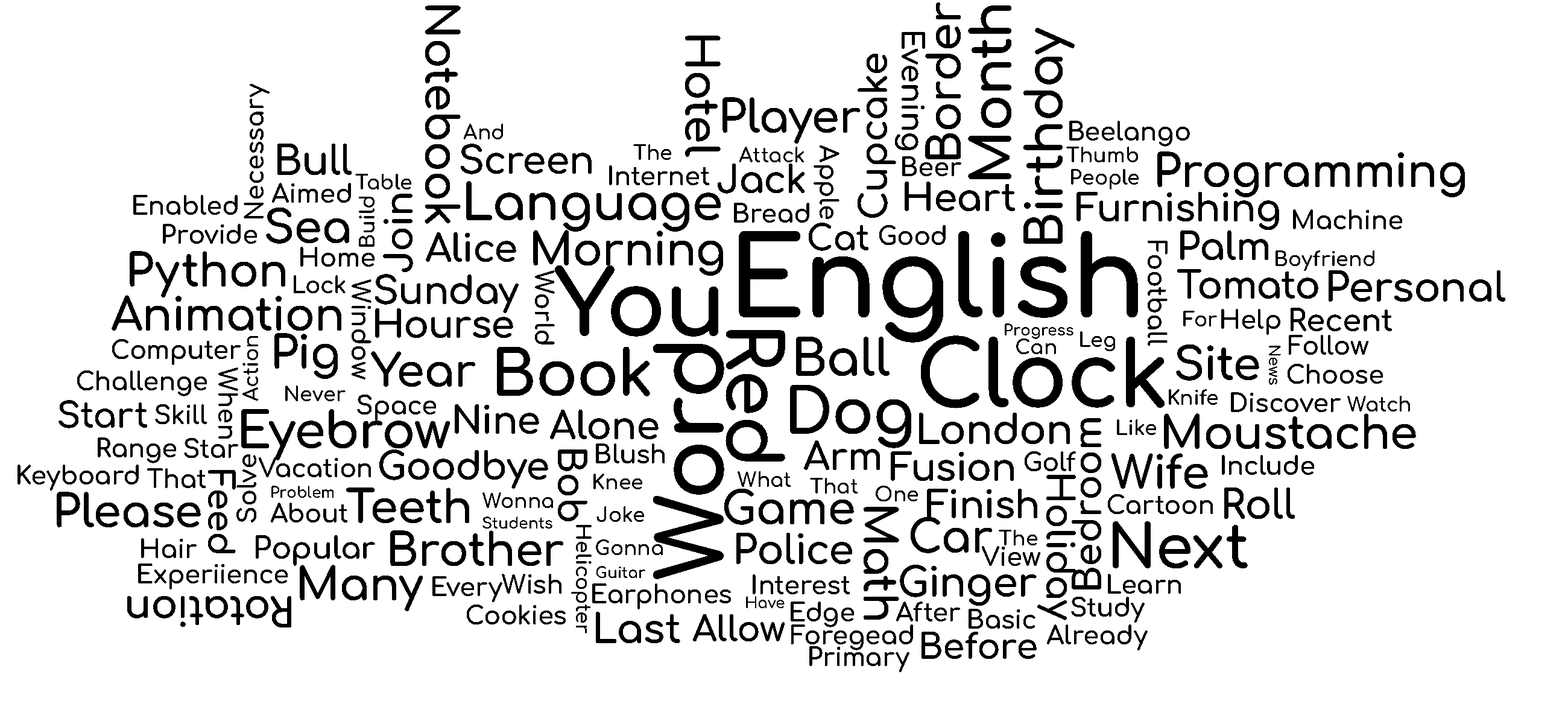
<style>
.page{position:relative;width:1568px;height:724px;background:#ffffff}
.page>*{position:absolute;margin:0}
.t1{font:45.2px "Comfortaa-Bold";color:#000000}
.t2{font:55.3px "Comfortaa-Bold";color:#000000}
.t3{font:50.3px "Comfortaa-Bold";color:#000000}
.t4{font:30.2px "Comfortaa-Bold";color:#000000}
.t5{font:37.7px "Comfortaa-Bold";color:#000000}
.t6{font:25.1px "Comfortaa-Bold";color:#000000}
.t7{font:20.1px "Comfortaa-Bold";color:#000000}
.t8{font:40.2px "Comfortaa-Bold";color:#000000}
.t9{font:110.6px "Comfortaa-Bold";color:#000000}
.t10{font:35.2px "Comfortaa-Bold";color:#000000}
.t11{font:90.5px "Comfortaa-Bold";color:#000000}
.t12{font:22.6px "Comfortaa-Bold";color:#000000}
.t13{font:75.4px "Comfortaa-Bold";color:#000000}
.t14{font:15.1px "Comfortaa-Bold";color:#000000}
.t15{font:62.8px "Comfortaa-Bold";color:#000000}
.t16{font:60.3px "Comfortaa-Bold";color:#000000}
</style>
<div class="page">
<p class="t1" style="left:425px;top:5px;width:36px;height:219px;rotate:90deg">Notebook</p>
<p class="t1" style="left:925px;top:2px;width:36px;height:157px;rotate:-90deg">Border</p>
<p class="t2" style="left:968px;top:5px;width:43px;height:174px;rotate:-90deg">Month</p>
<p class="t3" style="left:1023px;top:28px;width:52px;height:216px;rotate:-90deg">Birthday</p>
<p class="t1" style="left:685px;top:36px;width:36px;height:121px;rotate:90deg">Hotel</p>
<p class="t4" style="left:895px;top:32px;width:30px;height:118px;rotate:90deg">Evening</p>
<p class="t5" style="left:858px;top:54px;width:38px;height:164px;rotate:-90deg">Cupcake</p>
<p class="t6" style="left:244px;top:84px;width:26px;height:134px;rotate:-90deg">Necessary</p>
<p class="t1" style="left:722px;top:97px;width:138px;height:47px">Player</p>
<p class="t7" style="left:464px;top:124px;width:39px;height:15px">And</p>
<p class="t6" style="left:1069px;top:121px;width:121px;height:26px">Beelango</p>
<p class="t8" style="left:277px;top:144px;width:75px;height:31px">Bull</p>
<p class="t5" style="left:461px;top:144px;width:131px;height:30px">Screen</p>
<p class="t7" style="left:633px;top:144px;width:38px;height:16px">The</p>
<p class="t7" style="left:739px;top:147px;width:65px;height:15px">Attack</p>
<p class="t6" style="left:814px;top:145px;width:25px;height:74px;rotate:90deg">Apple</p>
<p class="t7" style="left:1066px;top:147px;width:72px;height:15px">Thumb</p>
<p class="t6" style="left:902px;top:156px;width:59px;height:20px">Beer</p>
<p class="t1" style="left:1157px;top:151px;width:308px;height:46px">Programming</p>
<p class="t7" style="left:355px;top:174px;width:56px;height:15px">Table</p>
<p class="t6" style="left:609px;top:165px;width:100px;height:20px">Internet</p>
<p class="t5" style="left:718px;top:163px;width:87px;height:31px">Jack</p>
<p class="t7" style="left:1071px;top:169px;width:68px;height:20px">People</p>
<p class="t6" style="left:272px;top:183px;width:79px;height:20px">Aimed</p>
<p class="t3" style="left:466px;top:181px;width:255px;height:51px">Language</p>
<p class="t5" style="left:905px;top:182px;width:110px;height:29px">Heart</p>
<p class="t6" style="left:133px;top:195px;width:105px;height:20px">Enabled</p>
<p class="t7" style="left:359px;top:197px;width:16px;height:50px;rotate:-90deg">Build</p>
<p class="t5" style="left:383px;top:194px;width:30px;height:78px;rotate:-90deg">Join</p>
<p class="t5" style="left:1076px;top:192px;width:203px;height:38px">Furnishing</p>
<p class="t1" style="left:266px;top:207px;width:83px;height:37px">Sea</p>
<p class="t6" style="left:734px;top:203px;width:75px;height:20px">Bread</p>
<p class="t6" style="left:1293px;top:209px;width:109px;height:20px">Machine</p>
<p class="t6" style="left:163px;top:224px;width:94px;height:20px">Provide</p>
<p class="t5" style="left:426px;top:232px;width:90px;height:30px">Alice</p>
<p class="t1" style="left:533px;top:230px;width:190px;height:46px">Morning</p>
<p class="t9" style="left:739px;top:231px;width:399px;height:112px">English</p>
<p class="t10" style="left:809px;top:223px;width:59px;height:28px">Cat</p>
<p class="t6" style="left:879px;top:225px;width:67px;height:20px">Good</p>
<p class="t5" style="left:1180px;top:230px;width:88px;height:30px">Palm</p>
<p class="t6" style="left:1148px;top:241px;width:20px;height:105px;rotate:90deg">Football</p>
<p class="t1" style="left:130px;top:251px;width:155px;height:46px">Python</p>
<p class="t6" style="left:300px;top:247px;width:75px;height:20px">Home</p>
<p class="t7" style="left:1276px;top:250px;width:98px;height:21px">Boyfriend</p>
<p class="t11" style="left:555px;top:265px;width:163px;height:72px">You</p>
<p class="t5" style="left:1177px;top:269px;width:141px;height:30px">Tomato</p>
<p class="t12" style="left:294px;top:275px;width:52px;height:18px">Lock</p>
<p class="t6" style="left:352px;top:279px;width:19px;height:100px;rotate:90deg">Window</p>
<p class="t5" style="left:375px;top:274px;width:144px;height:39px">Sunday</p>
<p class="t6" style="left:535px;top:270px;width:20px;height:74px;rotate:90deg">World</p>
<p class="t8" style="left:1329px;top:270px;width:176px;height:32px">Personal</p>
<p class="t1" style="left:112px;top:295px;width:229px;height:35px">Animation</p>
<p class="t5" style="left:375px;top:308px;width:138px;height:30px">Hourse</p>
<p class="t7" style="left:1183px;top:311px;width:34px;height:15px">For</p>
<p class="t6" style="left:1221px;top:309px;width:59px;height:26px">Help</p>
<p class="t4" style="left:1291px;top:308px;width:101px;height:23px">Recent</p>
<p class="t13" style="left:726px;top:330px;width:59px;height:131px;rotate:90deg">Red</p>
<p class="t14" style="left:1005px;top:323px;width:68px;height:16px">Progress</p>
<p class="t6" style="left:112px;top:339px;width:129px;height:26px">Computer</p>
<p class="t7" style="left:242px;top:336px;width:16px;height:64px;rotate:-90deg">Action</p>
<p class="t1" style="left:274px;top:333px;width:64px;height:46px">Pig</p>
<p class="t3" style="left:796px;top:337px;width:94px;height:39px">Ball</p>
<p class="t11" style="left:921px;top:335px;width:244px;height:73px">Clock</p>
<p class="t7" style="left:1016px;top:338px;width:40px;height:16px">Can</p>
<p class="t7" style="left:1080px;top:331px;width:35px;height:20px">Leg</p>
<p class="t6" style="left:1289px;top:335px;width:79px;height:20px">Follow</p>
<p class="t1" style="left:371px;top:351px;width:104px;height:36px">Year</p>
<p class="t15" style="left:497px;top:347px;width:153px;height:49px">Book</p>
<p class="t11" style="left:653px;top:344px;width:71px;height:235px;rotate:-90deg">Word</p>
<p class="t1" style="left:1176px;top:344px;width:83px;height:37px">Site</p>
<p class="t14" style="left:1269px;top:346px;width:12px;height:39px;rotate:90deg">News</p>
<p class="t6" style="left:1288px;top:364px;width:95px;height:20px">Choose</p>
<p class="t6" style="left:77px;top:370px;width:130px;height:26px">Challenge</p>
<p class="t6" style="left:218px;top:367px;width:20px;height:71px;rotate:90deg">When</p>
<p class="t7" style="left:285px;top:385px;width:61px;height:16px">Never</p>
<p class="t15" style="left:790px;top:385px;width:121px;height:63px">Dog</p>
<p class="t7" style="left:1169px;top:389px;width:49px;height:16px">Knife</p>
<p class="t10" style="left:58px;top:400px;width:89px;height:28px">Start</p>
<p class="t6" style="left:357px;top:394px;width:79px;height:26px">Space</p>
<p class="t6" style="left:1231px;top:392px;width:110px;height:20px">Discover</p>
<p class="t7" style="left:1347px;top:396px;width:63px;height:15px">Watch</p>
<p class="t6" style="left:155px;top:404px;width:52px;height:20px">Skill</p>
<p class="t3" style="left:241px;top:409px;width:209px;height:51px">Eyebrow</p>
<p class="t5" style="left:455px;top:404px;width:84px;height:30px">Nine</p>
<p class="t5" style="left:550px;top:409px;width:109px;height:30px">Alone</p>
<p class="t8" style="left:919px;top:413px;width:151px;height:31px">London</p>
<p class="t1" style="left:1164px;top:413px;width:252px;height:36px">Moustache</p>
<p class="t5" style="left:1072px;top:418px;width:29px;height:171px;rotate:-90deg">Bedroom</p>
<p class="t7" style="left:1117px;top:419px;width:39px;height:16px">Like</p>
<p class="t6" style="left:98px;top:437px;width:78px;height:26px">Range</p>
<p class="t6" style="left:184px;top:438px;width:54px;height:20px">Star</p>
<p class="t5" style="left:379px;top:449px;width:169px;height:39px">Goodbye</p>
<p class="t5" style="left:558px;top:449px;width:29px;height:72px;rotate:90deg">Bob</p>
<p class="t6" style="left:596px;top:443px;width:69px;height:20px">Blush</p>
<p class="t5" style="left:804px;top:440px;width:76px;height:30px">Arm</p>
<p class="t6" style="left:236px;top:454px;width:20px;height:68px;rotate:-90deg">Solve</p>
<p class="t6" style="left:259px;top:457px;width:112px;height:20px">Vacation</p>
<p class="t5" style="left:891px;top:451px;width:123px;height:30px">Fusion</p>
<p class="t6" style="left:1025px;top:451px;width:51px;height:20px">Golf</p>
<p class="t1" style="left:1111px;top:453px;width:97px;height:35px">Wife</p>
<p class="t6" style="left:1222px;top:455px;width:92px;height:20px">Include</p>
<p class="t6" style="left:17px;top:464px;width:122px;height:26px">Keyboard</p>
<p class="t6" style="left:147px;top:468px;width:59px;height:20px">That</p>
<p class="t10" style="left:208px;top:470px;width:28px;height:83px;rotate:90deg">Feed</p>
<p class="t7" style="left:593px;top:473px;width:49px;height:16px">Knee</p>
<p class="t7" style="left:738px;top:471px;width:53px;height:16px">What</p>
<p class="t14" style="left:271px;top:485px;width:63px;height:13px">Problem</p>
<p class="t7" style="left:810px;top:478px;width:48px;height:15px">That</p>
<p class="t7" style="left:876px;top:485px;width:42px;height:16px">One</p>
<p class="t5" style="left:1037px;top:475px;width:39px;height:145px;rotate:90deg">Holiday</p>
<p class="t1" style="left:57px;top:492px;width:144px;height:35px">Please</p>
<p class="t1" style="left:346px;top:487px;width:123px;height:36px">Teeth</p>
<p class="t7" style="left:482px;top:492px;width:71px;height:16px">Wonna</p>
<p class="t1" style="left:724px;top:488px;width:130px;height:37px">Game</p>
<p class="t5" style="left:927px;top:488px;width:110px;height:30px">Finish</p>
<p class="t6" style="left:1108px;top:494px;width:105px;height:20px">Cartoon</p>
<p class="t8" style="left:1224px;top:487px;width:71px;height:32px">Roll</p>
<p class="t6" style="left:271px;top:502px;width:76px;height:20px">About</p>
<p class="t7" style="left:596px;top:506px;width:48px;height:16px">Joke</p>
<p class="t1" style="left:864px;top:507px;width:35px;height:112px;rotate:90deg">Math</p>
<p class="t14" style="left:482px;top:516px;width:70px;height:12px">Students</p>
<p class="t1" style="left:911px;top:517px;width:81px;height:36px">Car</p>
<p class="t16" style="left:1113px;top:521px;width:135px;height:47px">Next</p>
<p class="t1" style="left:390px;top:530px;width:173px;height:36px">Brother</p>
<p class="t7" style="left:571px;top:525px;width:21px;height:108px;rotate:90deg">Helicopter</p>
<p class="t8" style="left:736px;top:533px;width:116px;height:31px">Police</p>
<p class="t7" style="left:999px;top:530px;width:38px;height:15px">The</p>
<p class="t6" style="left:141px;top:538px;width:56px;height:20px">Hair</p>
<p class="t4" style="left:256px;top:535px;width:119px;height:31px">Popular</p>
<p class="t7" style="left:596px;top:539px;width:67px;height:16px">Gonna</p>
<p class="t6" style="left:982px;top:546px;width:58px;height:20px">View</p>
<p class="t6" style="left:138px;top:563px;width:150px;height:26px">Experiience</p>
<p class="t1" style="left:300px;top:564px;width:123px;height:47px">Many</p>
<p class="t14" style="left:596px;top:566px;width:49px;height:12px">Guitar</p>
<p class="t8" style="left:900px;top:564px;width:137px;height:41px">Ginger</p>
<p class="t6" style="left:432px;top:576px;width:70px;height:26px">Every</p>
<p class="t6" style="left:502px;top:574px;width:59px;height:19px">Wish</p>
<p class="t6" style="left:753px;top:574px;width:97px;height:20px">Interest</p>
<p class="t6" style="left:1108px;top:574px;width:73px;height:19px">Learn</p>
<p class="t6" style="left:592px;top:583px;width:139px;height:26px">Earphones</p>
<p class="t8" style="left:127px;top:596px;width:164px;height:31px;rotate:180deg">Rotation</p>
<p class="t6" style="left:467px;top:604px;width:99px;height:20px">Cookies</p>
<p class="t14" style="left:746px;top:596px;width:39px;height:12px">Have</p>
<p class="t6" style="left:791px;top:601px;width:63px;height:26px">Edge</p>
<p class="t6" style="left:896px;top:601px;width:64px;height:20px">After</p>
<p class="t6" style="left:1071px;top:596px;width:74px;height:26px">Study</p>
<p class="t8" style="left:596px;top:612px;width:84px;height:31px">Last</p>
<p class="t10" style="left:693px;top:614px;width:92px;height:27px">Allow</p>
<p class="t6" style="left:969px;top:609px;width:66px;height:19px">Basic</p>
<p class="t6" style="left:791px;top:624px;width:122px;height:26px">Foregead</p>
<p class="t6" style="left:1047px;top:624px;width:101px;height:26px">Already</p>
<p class="t10" style="left:922px;top:631px;width:115px;height:28px">Before</p>
<p class="t6" style="left:809px;top:646px;width:100px;height:26px">Primary</p>
</div>
